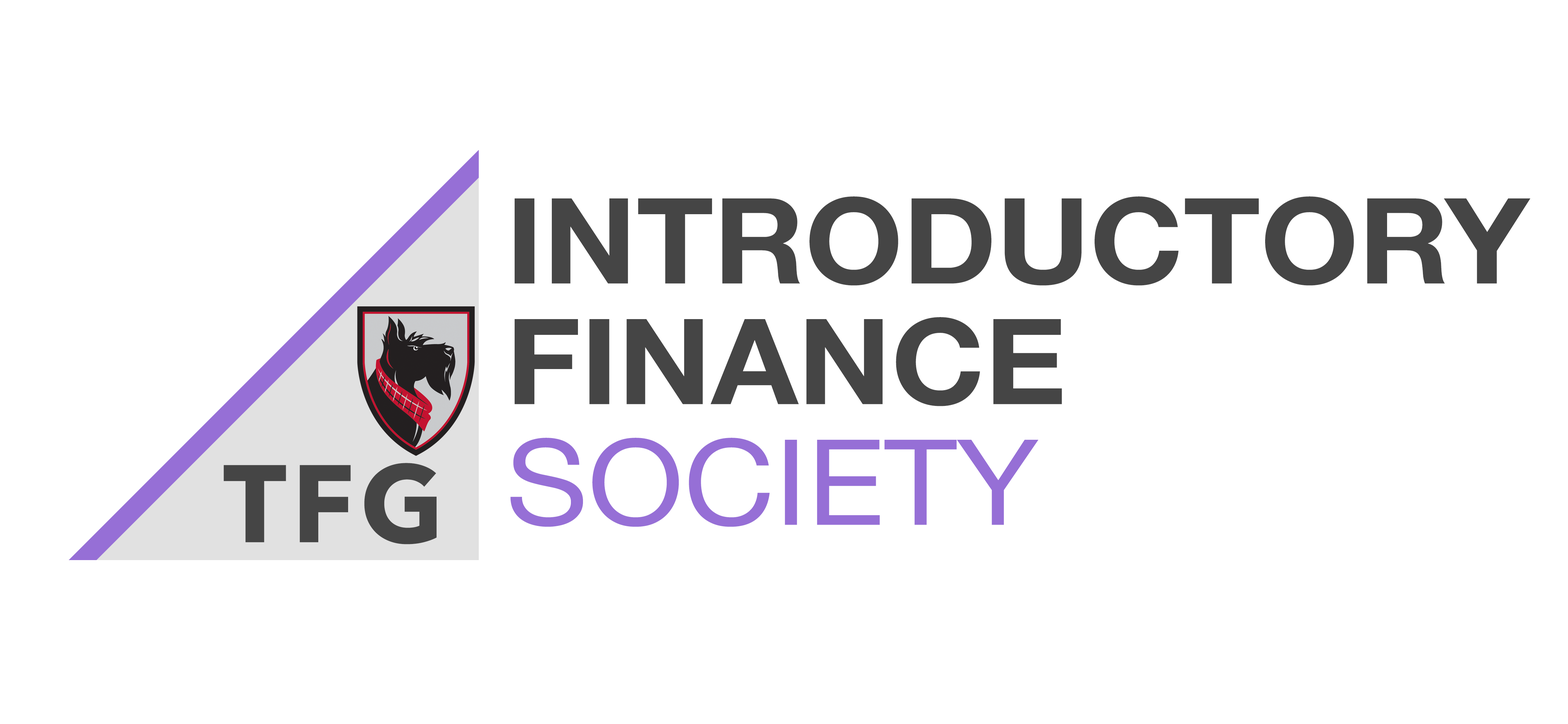
<style>
.page{position:relative;width:1568px;height:724px;background:#ffffff}
.page>*{position:absolute;margin:0}
.t1{font:118.9px/120.6px "HelveticaNeue-Bold";color:#454545;scale:1.06 1}
.t2{font:118.9px/120.6px "HelveticaNeue";color:#966fd6;scale:1.06 1}
.t3{font:108.9px "AvenirNext-Bold";letter-spacing:0.05em;color:#454545}
</style>
<div class="page">
<p class="t1" style="left:510px;top:196px;width:1020px;height:331px">INTRODUCTORY<br>FINANCE<br><span class="t2">SOCIETY</span></p>
<p class="t3" style="left:223px;top:463px;width:214px;height:81px">TFG</p>
</div>
